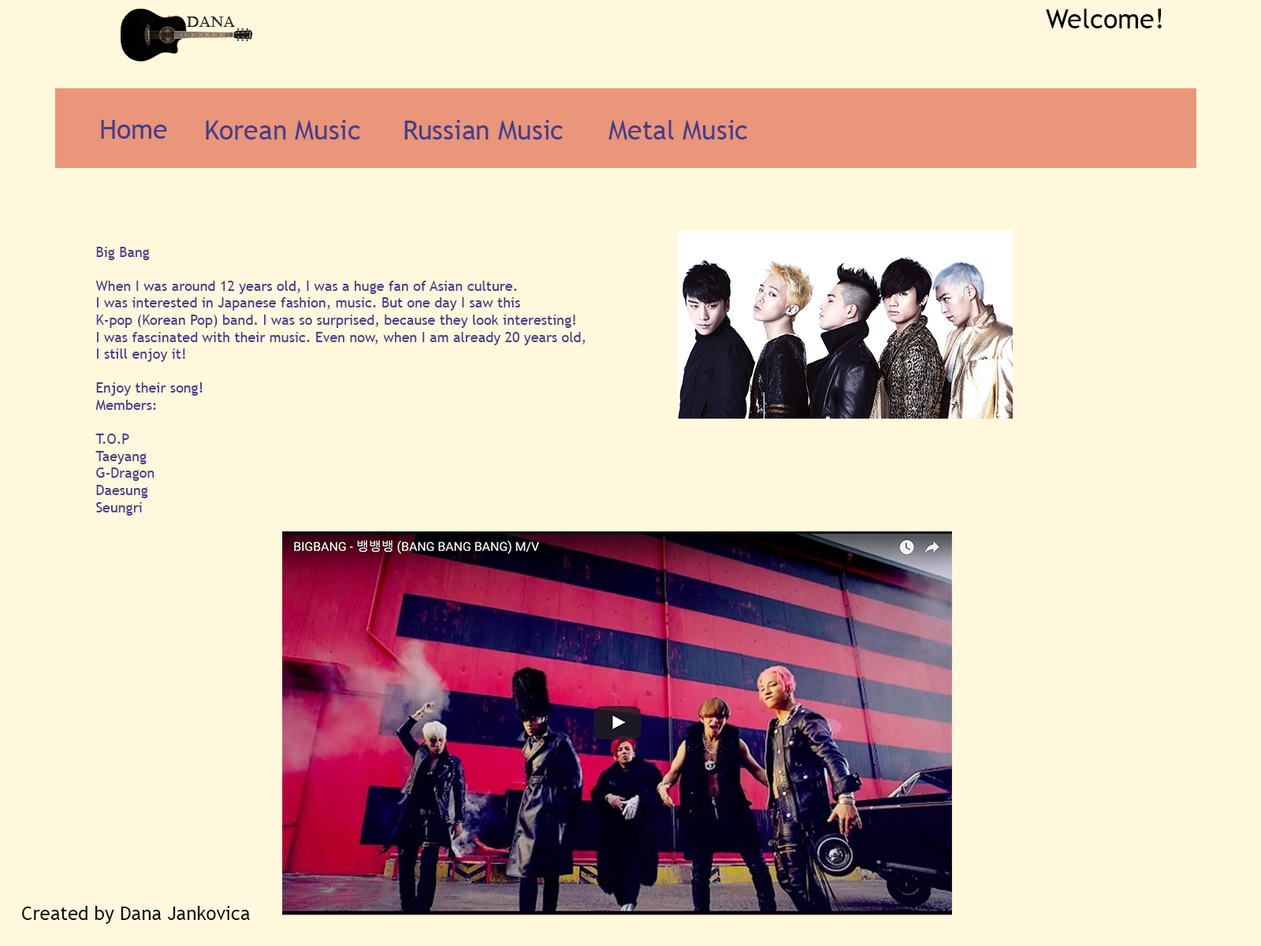
<style>
.page{position:relative;width:1261px;height:946px;background:#fff8dc}
.page>*{position:absolute;margin:0}
.t1{font:26.8px "TrebuchetMS";color:#000000}
.t2{font:26.8px "TrebuchetMS";color:#483d8b}
.t3{font:14.2px "TrebuchetMS";color:#483d8b}
.t4{font:18.9px "TrebuchetMS";color:#111112}
</style>
<div class="page">
<p class="t1" style="left:1046px;top:9px;width:116px;height:19px">Welcome!</p>
<p class="t2" style="left:101px;top:120px;width:66px;height:19px">Home</p>
<p class="t2" style="left:206px;top:120px;width:154px;height:19px">Korean Music</p>
<p class="t2" style="left:404px;top:120px;width:159px;height:19px">Russian Music</p>
<p class="t2" style="left:608px;top:120px;width:139px;height:19px">Metal Music</p>
<p class="t3" style="left:95px;top:247px;width:491px;height:268px">Big Bang<br><br>When I was around 12 years old, I was a huge fan of Asian culture. <br>I was interested in Japanese fashion, music. But one day I saw this <br>K-pop (Korean Pop) band. I was so surprised, because they look interesting!<br>I was fascinated with their music. Even now, when I am already 20 years old, <br>I still enjoy it!<br><br>Enjoy their song!<br>Members:<br><br>T.O.P<br>Taeyang<br>G-Dragon<br>Daesung<br>Seungri</p>
<p class="t4" style="left:22px;top:905px;width:228px;height:19px">Created by Dana Jankovica</p>
</div>
